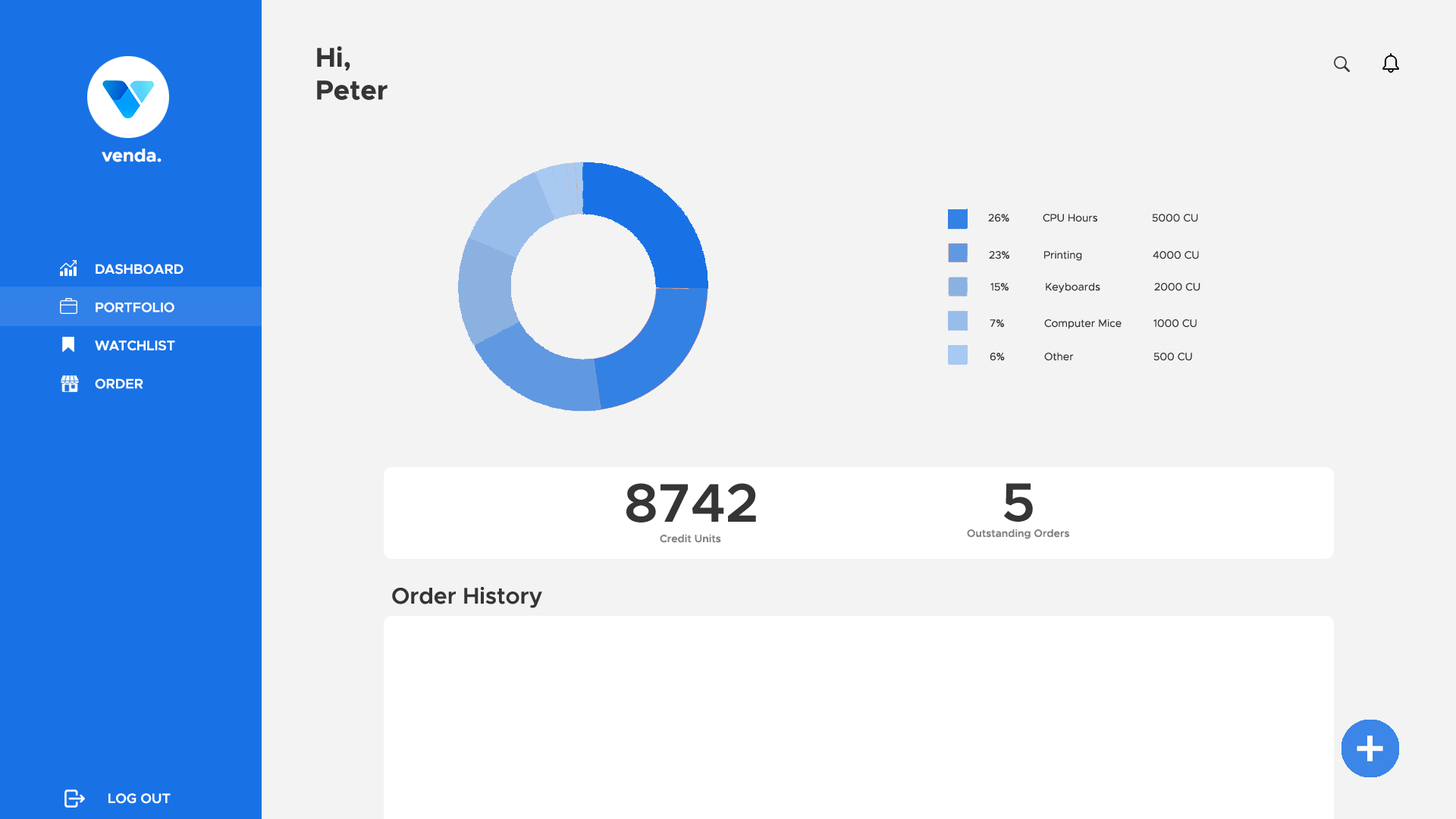
<style>
.page{position:relative;width:1456px;height:819px;background:#f3f3f3}
.page>*{position:absolute;margin:0}
.t1{font:27.3px "Metropolis-Bold";color:#353536}
.t2{font:18.2px "Metropolis-Bold";color:#ffffff}
.t3{font:10.6px "Metropolis-Regular";color:#353536}
.t4{font:13.6px "Metropolis-SemiBold";color:#ffffff}
.t5{font:54.6px "Metropolis-SemiBold";color:#353536}
.t6{font:10.6px "Metropolis-SemiBold";color:#848484}
.t7{font:22.7px "Metropolis-SemiBold";color:#353536}
.t8{font:54.6px "Metropolis-Medium";color:#ffffff}
</style>
<div class="page">
<p class="t1" style="left:317px;top:46px;width:71px;height:54px">Hi,<br>Peter</p>
<p class="t2" style="left:102px;top:149px;width:60px;height:13px">venda.</p>
<p class="t3" style="left:988px;top:214px;width:210px;height:8px">26%   CPU Hours  5000 CU</p>
<p class="t3" style="left:989px;top:251px;width:210px;height:10px">23%  Printing   4000 CU</p>
<p class="t4" style="left:95px;top:264px;width:89px;height:125px">DASHBOARD<br><br>PORTFOLIO<br><br>WATCHLIST<br><br>ORDER</p>
<p class="t3" style="left:990px;top:283px;width:210px;height:10px">15%  Keyboards  2000 CU</p>
<p class="t3" style="left:990px;top:319px;width:207px;height:10px">7%   Computer Mice  1000 CU</p>
<p class="t3" style="left:990px;top:353px;width:202px;height:8px">6%  Other   500 CU</p>
<p class="t5" style="left:626px;top:483px;width:130px;height:39px">8742</p>
<p class="t5" style="left:1004px;top:483px;width:29px;height:39px">5</p>
<p class="t6" style="left:660px;top:534px;width:61px;height:9px">Credit Units</p>
<p class="t6" style="left:967px;top:529px;width:102px;height:10px">Outstanding Orders</p>
<p class="t7" style="left:392px;top:586px;width:150px;height:22px">Order History</p>
<p class="t8" style="left:1357px;top:736px;width:26px;height:25px">+</p>
<p class="t4" style="left:108px;top:793px;width:63px;height:11px">LOG OUT</p>
</div>
